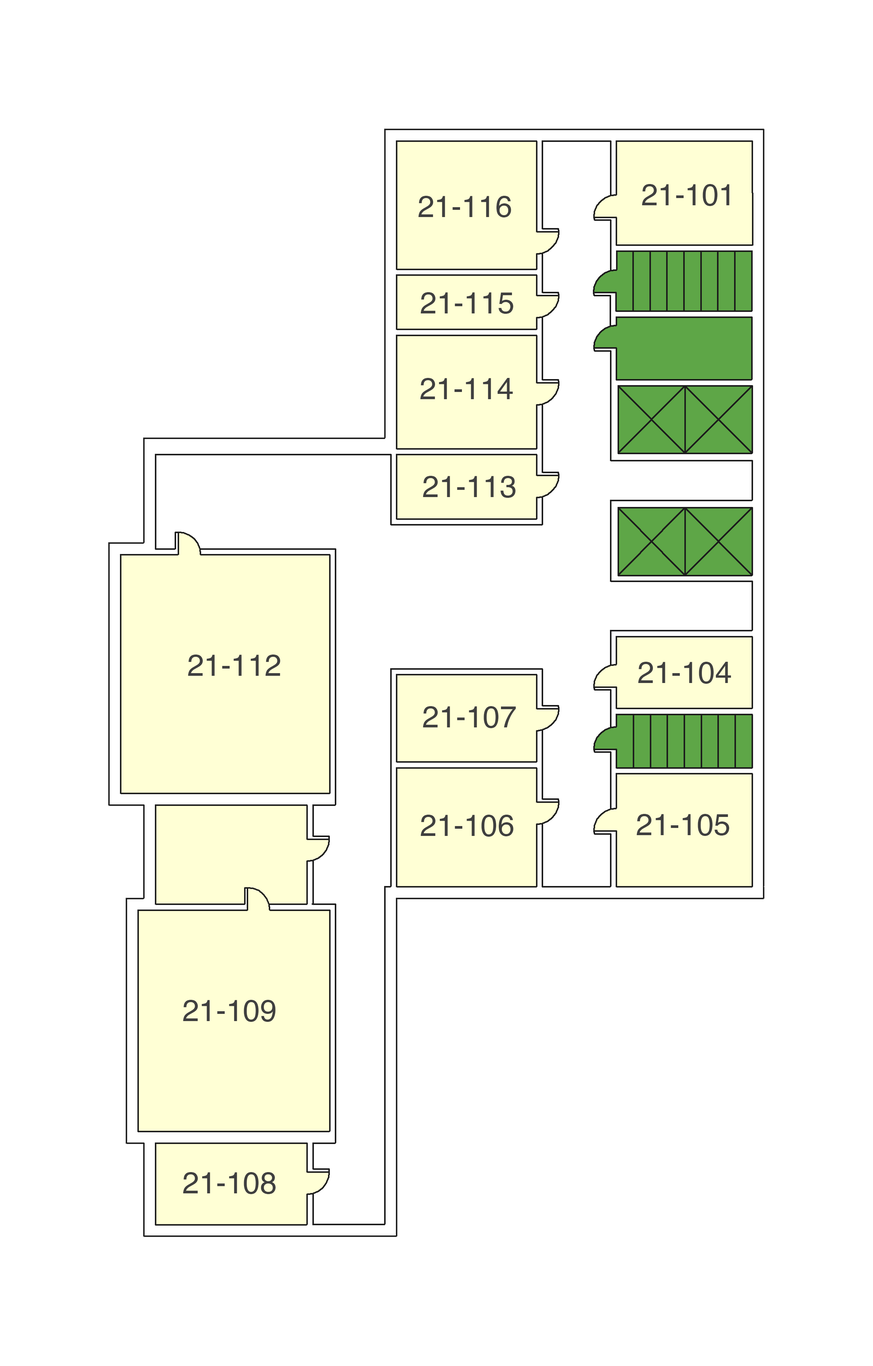
<style>
.page{position:relative;width:873px;height:1366px;background:#ffffff}
.page>*{position:absolute;margin:0}
.t1{font:30.4px "Helvetica";color:#3f3f3f}
</style>
<div class="page">
<p class="t1" style="left:642px;top:184px;width:87px;height:22px">21-101</p>
<p class="t1" style="left:418px;top:196px;width:93px;height:21px">21-116</p>
<p class="t1" style="left:420px;top:292px;width:93px;height:22px">21-115</p>
<p class="t1" style="left:420px;top:378px;width:93px;height:21px">21-114</p>
<p class="t1" style="left:423px;top:476px;width:92px;height:22px">21-113</p>
<p class="t1" style="left:188px;top:655px;width:92px;height:21px">21-112</p>
<p class="t1" style="left:638px;top:662px;width:93px;height:22px">21-104</p>
<p class="t1" style="left:423px;top:706px;width:93px;height:22px">21-107</p>
<p class="t1" style="left:420px;top:815px;width:93px;height:22px">21-106</p>
<p class="t1" style="left:636px;top:814px;width:93px;height:22px">21-105</p>
<p class="t1" style="left:183px;top:1000px;width:93px;height:22px">21-109</p>
<p class="t1" style="left:183px;top:1172px;width:93px;height:22px">21-108</p>
</div>
